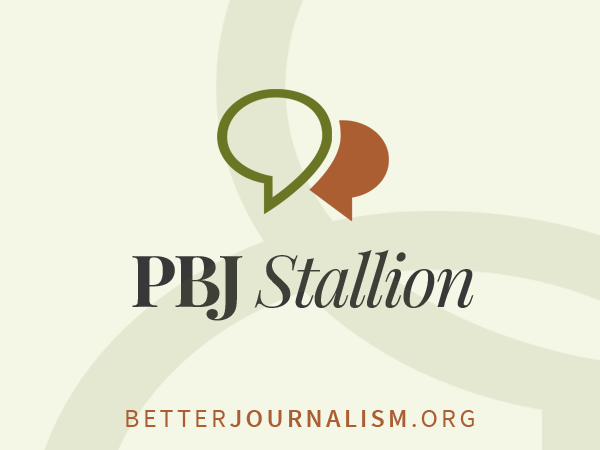
<style>
.page{position:relative;width:600px;height:450px;background:#f4f6e6}
.page>*{position:absolute;margin:0}
.t1{font:72px "PlayfairDisplay-Italic";letter-spacing:-0.04em;color:#383838}
.t2{font:72px "PlayfairDisplay-Bold";letter-spacing:-0.04em;color:#383838}
.t3{font:26.1px "SourceSansPro-Semibold";letter-spacing:0.12em;color:#ac5e33;text-transform:uppercase}
.t4{font:26.1px "SourceSansPro-Regular";letter-spacing:0.12em;color:#ac5e33;text-transform:uppercase}
</style>
<div class="page">
<p class="t1" style="left:132px;top:249px;width:342px;height:72px"><span class="t2">PBJ </span>Stallion</p>
<p class="t3" style="left:126px;top:410px;width:348px;height:17px"><span class="t4">better</span>journalism<span class="t4">.org</span></p>
</div>
